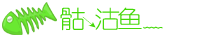
<style>
.page{position:relative;width:200px;height:38px;background:#ffffff}
.page>*{position:absolute;margin:0}
.t1{font:24.4px "YouYuan";letter-spacing:-0.1em;color:#43d707;scale:1.08 1}
.t2{font:13.1px "YouYuan";letter-spacing:-0.1em;color:#43d707;scale:1.08 1}
</style>
<div class="page">
<p class="t1" style="left:60px;top:7px;width:103px;height:24px">骷<span class="t2">↘</span>沽鱼﹏</p>
</div>
